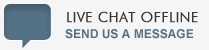
<style>
.page{position:relative;width:209px;height:50px;background:#f5f5f5}
.page>*{position:absolute;margin:0}
.t1{font:14px "FuturaBT-Light";letter-spacing:0.025em;color:#363636;text-transform:uppercase;font-weight:bold}
.t2{font:12px "Arial-BoldMT";color:#547186;text-transform:uppercase}
</style>
<div class="page">
<p class="t1" style="left:67px;top:11px;width:131px;height:12px">live chat offline</p>
<p class="t2" style="left:65px;top:29px;width:129px;height:10px">send us a message</p>
</div>
